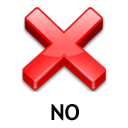
<style>
.page{position:relative;width:128px;height:128px;background:#ffffff}
.page>*{position:absolute;margin:0}
.t1{font:22px "TrebuchetMS-Bold";color:#060606}
</style>
<div class="page">
<p class="t1" style="left:51px;top:104px;width:28px;height:17px">NO</p>
</div>
